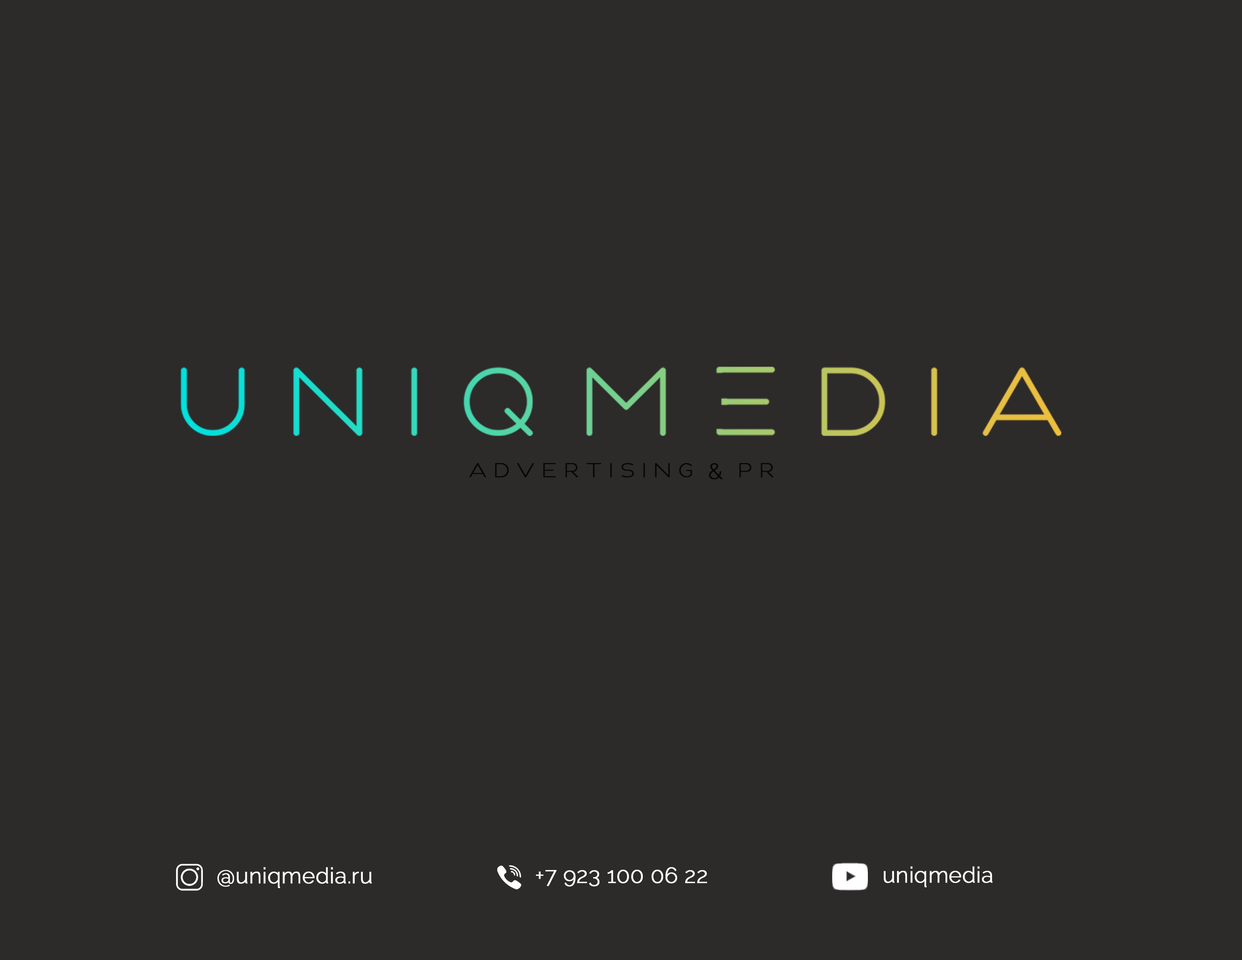
<style>
.page{position:relative;width:1242px;height:960px;background:#2d2a2a}
.page>*{position:absolute;margin:0}
.t1{font:22px "FunCityLevel1-Basic";color:#070707;font-weight:bold}
.t2{font:22px "Raleway-Light";color:#070707;font-weight:bold}
.t3{font:22px "Raleway-Light";color:#ffffff;font-weight:bold}
</style>
<div class="page">
<p class="t1" style="left:469px;top:463px;width:305px;height:17px">advertising <span class="t2">&amp;</span> PR</p>
<p class="t3" style="left:217px;top:867px;width:155px;height:21px">@uniqmedia.ru</p>
<p class="t3" style="left:536px;top:867px;width:171px;height:20px">+7 923 100 06 22</p>
<p class="t3" style="left:884px;top:866px;width:109px;height:21px">uniqmedia</p>
</div>
